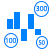
<style>
.page{position:relative;width:50px;height:50px;background:#ffffff}
.page>*{position:absolute;margin:0}
.t1{font:6.9px "SegoeUI";color:#0078ff}
.t2{font:6.9px "SegoeUI"}
.t3{font:6px "SegoeUI"}
</style>
<div class="page">
<p class="t1" style="left:36px;top:6px;width:12px;height:6px">300</p>
<p class="t2" style="left:5px;top:37px;width:12px;height:7px">100</p>
<p class="t3" style="left:38px;top:40px;width:7px;height:5px">50</p>
</div>
